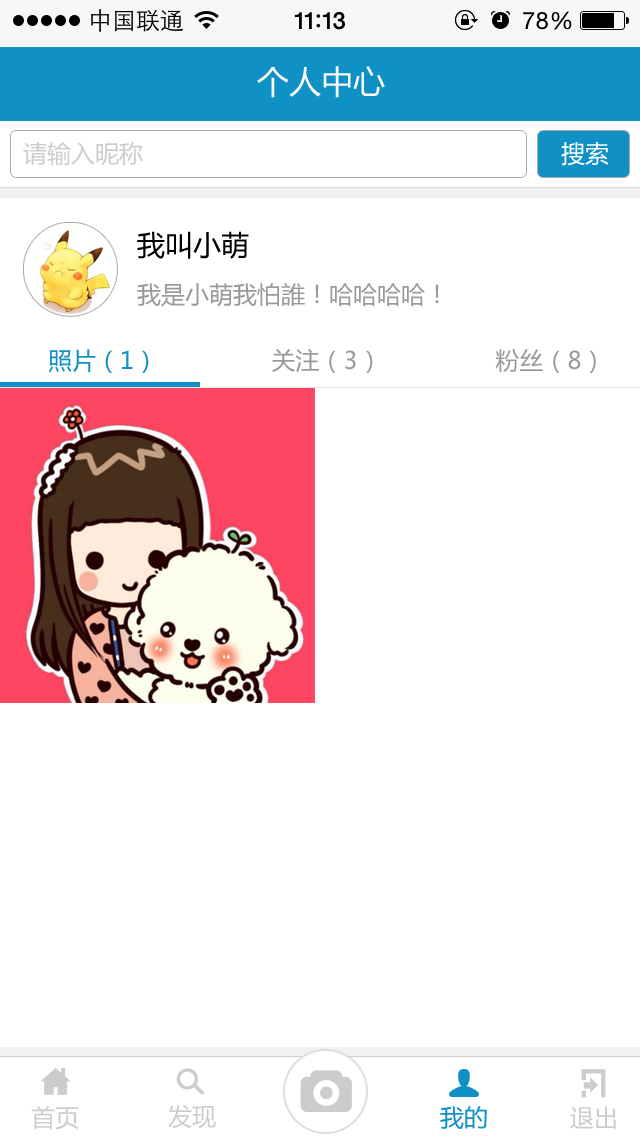
<style>
.page{position:relative;width:640px;height:1136px;background:#ffffff}
.page>*{position:absolute;margin:0}
.t1{font:32px "MicrosoftYaHei";color:#ffffff}
.t2{font:24px "MicrosoftYaHei";color:#cccccc}
.t3{font:24px "MicrosoftYaHei";color:#ffffff}
.t4{font:28px "MicrosoftYaHei";color:#000000}
.t5{font:24px "MicrosoftYaHei";color:#999999}
.t6{font:24px "MicrosoftYaHei";color:#0f91c5}
</style>
<div class="page">
<p class="t1" style="left:257px;top:66px;width:128px;height:32px">个人中心</p>
<p class="t2" style="left:23px;top:142px;width:120px;height:24px">请输入昵称</p>
<p class="t3" style="left:561px;top:142px;width:48px;height:24px">搜索</p>
<p class="t4" style="left:137px;top:231px;width:112px;height:28px">我叫小萌</p>
<p class="t5" style="left:137px;top:283px;width:302px;height:24px">我是小萌我怕誰！哈哈哈哈！</p>
<p class="t5" style="left:48px;top:348px;width:548px;height:25px"><span class="t6">照片（1）                </span>关注（3）                粉丝（8）</p>
<p class="t2" style="left:31px;top:1106px;width:48px;height:24px">首页</p>
<p class="t2" style="left:168px;top:1105px;width:48px;height:24px">发现</p>
<p class="t6" style="left:440px;top:1106px;width:47px;height:23px">我的</p>
<p class="t2" style="left:570px;top:1106px;width:46px;height:23px">退出</p>
</div>
